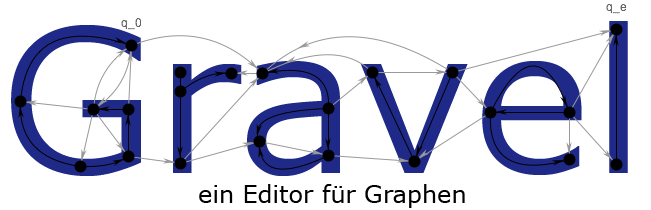
<style>
.page{position:relative;width:651px;height:210px;background:#ffffff}
.page>*{position:absolute;margin:0}
.t1{font:200px "Verdana";color:#1f2988}
.t2{font:24px "Verdana";color:#000000}
</style>
<div class="page">
<p class="t1" style="left:11px;top:21px;width:617px;height:155px">Gravel</p>
<p class="t2" style="left:199px;top:184px;width:266px;height:24px">ein Editor für Graphen</p>
</div>
